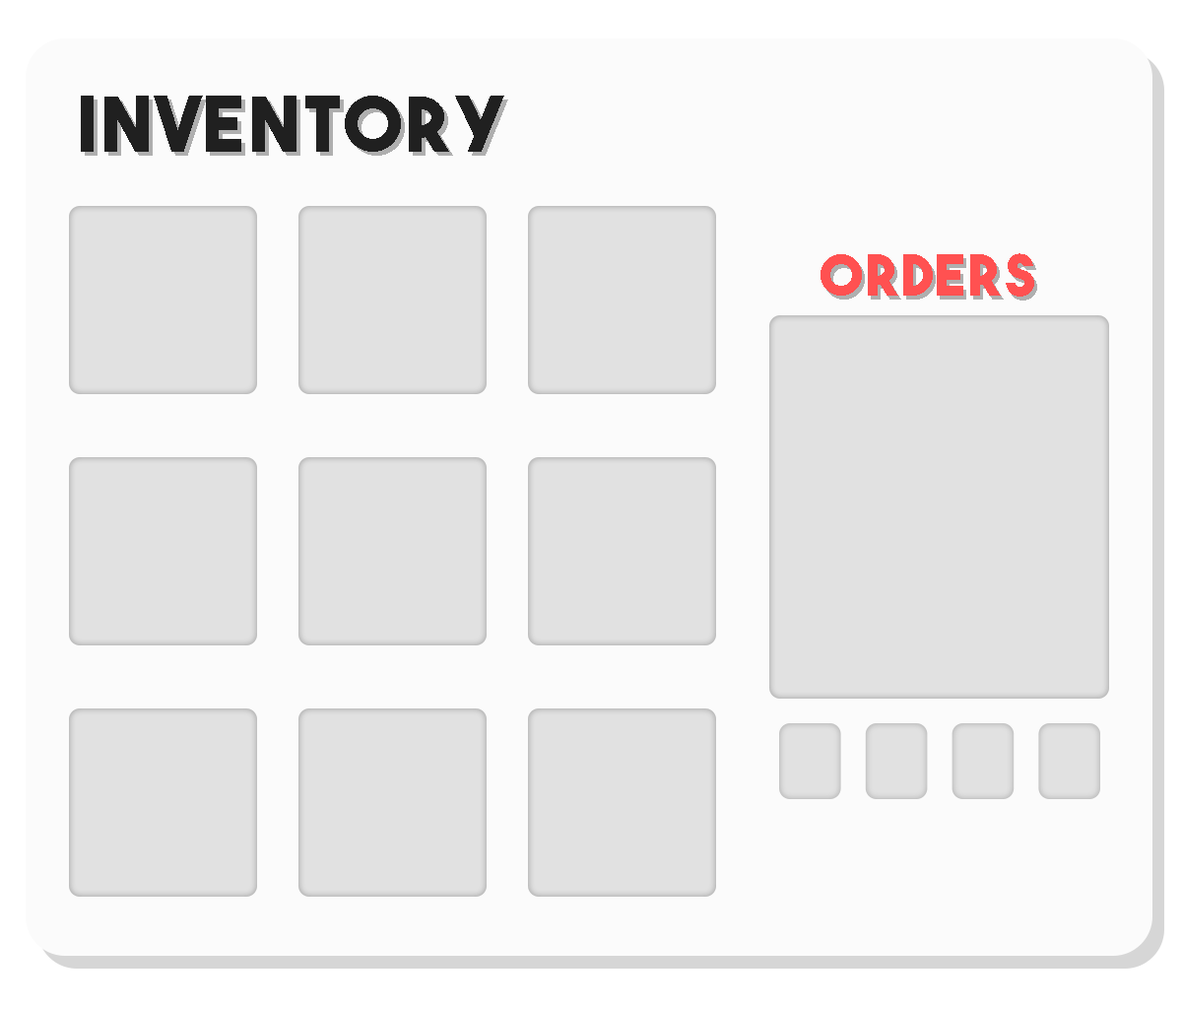
<style>
.page{position:relative;width:1182px;height:1009px;background:#fbfbfb}
.page>*{position:absolute;margin:0}
.t1{font:75.9px "TheBoldFont";letter-spacing:0.05em;color:#202020}
.t2{font:55.7px "TheBoldFont";letter-spacing:0.05em;color:#ff5151}
</style>
<div class="page">
<p class="t1" style="left:81px;top:96px;width:423px;height:56px">Inventory</p>
<p class="t2" style="left:821px;top:253px;width:213px;height:44px">orders</p>
</div>
